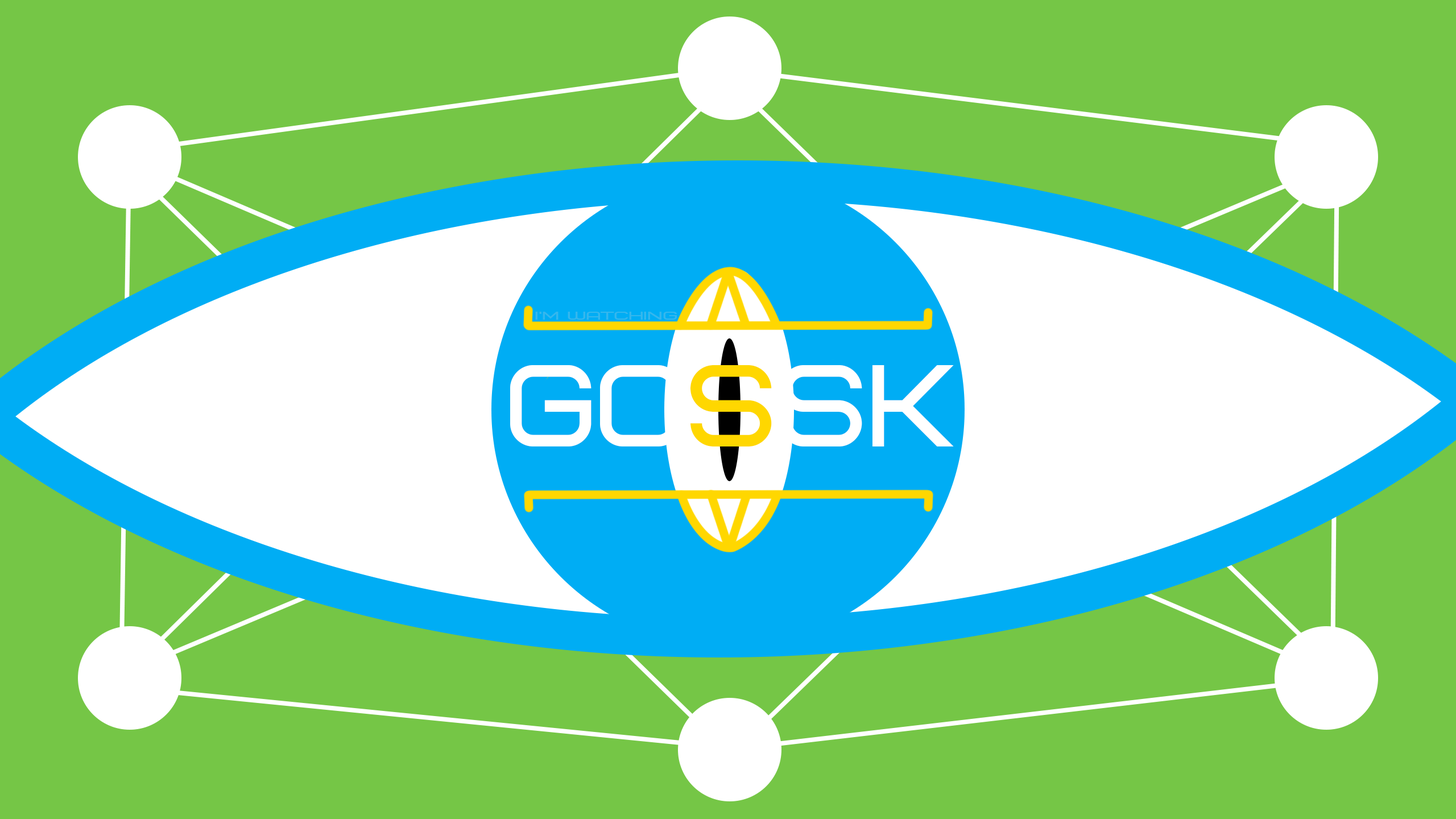
<style>
.page{position:relative;width:1456px;height:819px;background:#75c646}
.page>*{position:absolute;margin:0}
.t1{font:11.4px "Bicubik";color:#35b7ed;scale:1.67 1}
.t2{font:115.8px "Bicubik";color:#ffffff}
.t3{font:115.8px "Bicubik";color:#ffd700}
</style>
<div class="page">
<p class="t1" style="left:535px;top:312px;width:142px;height:8px">i’m watching</p>
<p class="t2" style="left:510px;top:365px;width:444px;height:81px">GO<span class="t3">S</span>SK</p>
</div>
